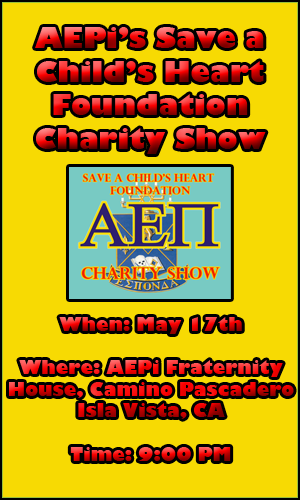
<style>
.page{position:relative;width:300px;height:500px;background:#f7da03}
.page>*{position:absolute;margin:0}
.t1{font:28px "GillSans-UltraBold"}
.t2{font:18px "GillSans-UltraBold"}
</style>
<div class="page">
<p class="t1" style="left:35px;top:27px;width:231px;height:127px;text-align:center">AEPi’s Save a<br>Child’s Heart<br>Foundation<br>Charity Show</p>
<p class="t2" style="left:9px;top:317px;width:285px;height:144px;text-align:center">When: May 17th<br><br>Where: AEPi Fraternity<br>House, Camino Pascadero<br>Isla Vista, CA<br><br>Time: 9:00 PM</p>
</div>
